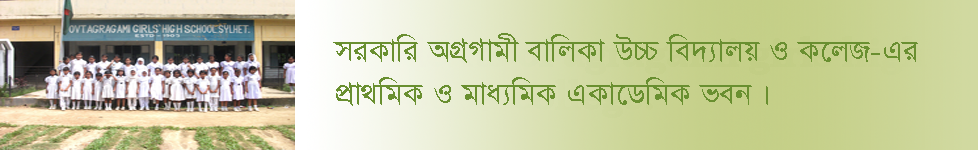
<style>
.page{position:relative;width:978px;height:150px}
.page>*{position:absolute;margin:0}
.t1{font:36px "SutonnyMJ";color:#698f30}
</style>
<div class="page">
<p class="t1" style="left:333px;top:33px;width:585px;height:73px">miKvwi AMÖMvgx evwjKv D”P we`¨vjq I K‡jR-Gi <br>cÖv_wgK I gva¨wgK GKv‡WwgK feb|</p>
</div>
